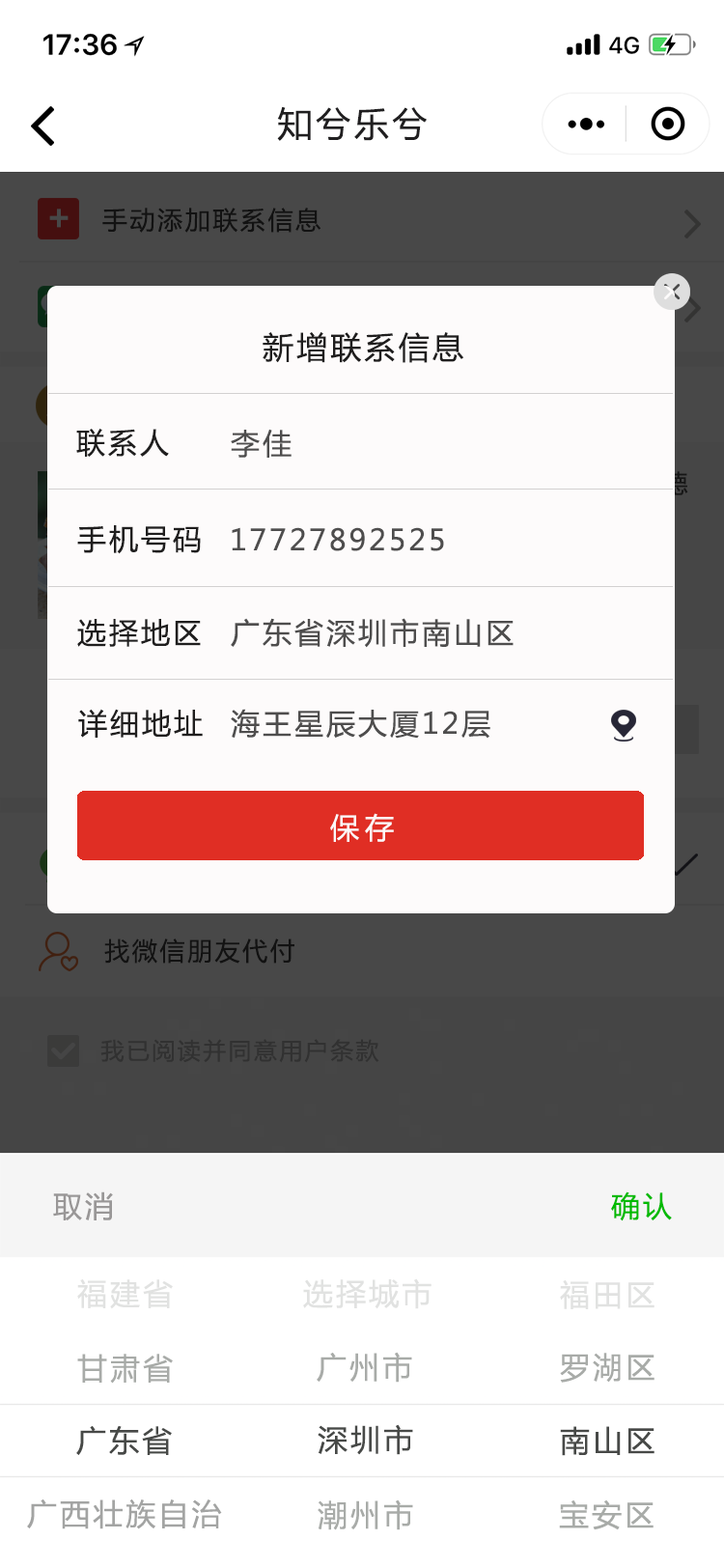
<style>
.page{position:relative;width:724px;height:1568px;background:#ffffff}
.page>*{position:absolute;margin:0}
.t1{font:34.8px "MicrosoftYaHei";letter-spacing:0.1em;color:#201f20}
.t2{font:34.8px "MicrosoftYaHei-Bold";letter-spacing:0.1em;color:#474747}
.t3{font:25.1px "MicrosoftYaHei";letter-spacing:0.1em;color:#282727}
.t4{font:30.9px "MicrosoftYaHei";letter-spacing:0.1em;color:#1f1e1e}
.t5{font:29px "MicrosoftYaHei";letter-spacing:0.1em;color:#1f1e1e}
.t6{font:29px "MicrosoftYaHei";letter-spacing:0.1em;color:#4e4d4d}
.t7{font:29px "MicrosoftYaHei";letter-spacing:0.2em;color:#fcf8f8}
.t8{font:23.2px "MicrosoftYaHei";letter-spacing:0.1em;color:#313131}
.t9{font:29px "MicrosoftYaHei";letter-spacing:0.1em;color:#999797}
.t10{font:29px "MicrosoftYaHei";letter-spacing:0.1em;color:#01ba00}
.t11{font:29.9px "MicrosoftYaHei";letter-spacing:0.1em;color:#e1e2e1}
.t12{font:29.9px "MicrosoftYaHei";letter-spacing:0.1em;color:#a8aba8}
.t13{font:29.9px "MicrosoftYaHei";letter-spacing:0.1em;color:#474947}
.t14{font:29.9px "MicrosoftYaHei";letter-spacing:0.1em;color:#a3a4a3}
</style>
<div class="page">
<p class="t1" style="left:277px;top:106px;width:150px;height:35px">知兮乐兮</p>
<p class="t2" style="left:49px;top:209px;width:20px;height:19px">+</p>
<p class="t3" style="left:102px;top:208px;width:220px;height:25px">手动添加联系信息</p>
<p class="t4" style="left:263px;top:332px;width:200px;height:31px">新增联系信息</p>
<p class="t5" style="left:76px;top:429px;width:93px;height:28px">联系人</p>
<p class="t6" style="left:231px;top:429px;width:61px;height:29px">李佳</p>
<p class="t5" style="left:77px;top:525px;width:124px;height:29px">手机号码</p>
<p class="t6" style="left:232px;top:527px;width:212px;height:24px">17727892525</p>
<p class="t6" style="left:231px;top:618px;width:283px;height:30px">广东省深圳市南山区</p>
<p class="t5" style="left:77px;top:619px;width:124px;height:28px">选择地区</p>
<p class="t5" style="left:78px;top:709px;width:125px;height:29px">详细地址</p>
<p class="t6" style="left:231px;top:709px;width:259px;height:30px">海王星辰大厦12层</p>
<p class="t7" style="left:330px;top:813px;width:64px;height:29px">保存</p>
<p class="t3" style="left:104px;top:938px;width:190px;height:26px">找微信朋友代付</p>
<p class="t8" style="left:100px;top:1039px;width:279px;height:24px">我已阅读并同意用户条款</p>
<p class="t9" style="left:53px;top:1191px;width:60px;height:29px">取消</p>
<p class="t10" style="left:611px;top:1191px;width:61px;height:30px">确认</p>
<p class="t11" style="left:77px;top:1279px;width:96px;height:30px">福建省</p>
<p class="t11" style="left:303px;top:1278px;width:129px;height:31px">选择城市</p>
<p class="t11" style="left:560px;top:1280px;width:95px;height:29px">福田区</p>
<p class="t12" style="left:77px;top:1354px;width:96px;height:30px">甘肃省</p>
<p class="t12" style="left:317px;top:1352px;width:95px;height:31px">广州市</p>
<p class="t12" style="left:560px;top:1353px;width:95px;height:30px">罗湖区</p>
<p class="t13" style="left:76px;top:1426px;width:96px;height:29px">广东省</p>
<p class="t13" style="left:318px;top:1424px;width:95px;height:31px">深圳市</p>
<p class="t13" style="left:560px;top:1426px;width:95px;height:30px">南山区</p>
<p class="t14" style="left:27px;top:1499px;width:195px;height:30px">广西壮族自治</p>
<p class="t12" style="left:318px;top:1499px;width:95px;height:31px">潮州市</p>
<p class="t12" style="left:559px;top:1499px;width:95px;height:31px">宝安区</p>
</div>
